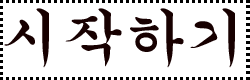
<style>
.page{position:relative;width:250px;height:80px;background:#ffffff}
.page>*{position:absolute;margin:0}
.t1{font:62px "H2gsrB";color:#170000}
</style>
<div class="page">
<p class="t1" style="left:4px;top:8px;width:231px;height:60px">시작하기</p>
</div>
